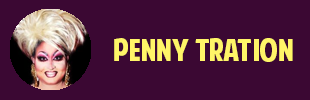
<style>
.page{position:relative;width:310px;height:100px;background:#3b0833}
.page>*{position:absolute;margin:0}
.t1{font:30px "AmericanPurpose";color:#fff568}
.t2{font:24px "Tahoma";color:#ffffff}
</style>
<div class="page">
<p class="t1" style="left:114px;top:38px;width:179px;height:24px"><span class="t2"><br></span>Penny Tration</p>
</div>
